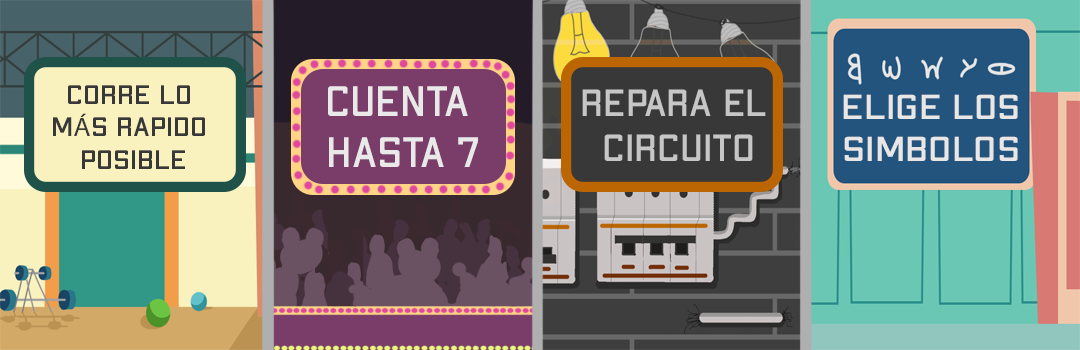
<style>
.page{position:relative;width:1080px;height:350px}
.page>*{position:absolute;margin:0}
.t1{font:26.9px "ApexMk2-Regular";color:#383838;scale:1.06 1}
.t2{font:26.9px "MyriadPro-Regular";color:#383838;scale:1.06 1}
.t3{font:37.7px "ApexMk2-Regular";color:#c6c6c6}
.t4{font:34.5px "ApexMk2-Regular";color:#e8e7e6;scale:1.12 1}
</style>
<div class="page">
<p class="t1" style="left:53px;top:85px;width:152px;height:84px;text-align:center">CORRE LO <br>M<span class="t2">Á</span>S RAPIDO <br>POSIBLE</p>
<p class="t3" style="left:582px;top:89px;width:184px;height:72px;text-align:center">REPARA EL <br>CIRCUITO</p>
<p class="t4" style="left:843px;top:94px;width:175px;height:67px;text-align:center">ELIGE LOS<br>SIMBOLOS</p>
</div>
